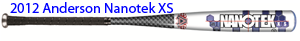
<style>
.page{position:relative;width:300px;height:41px;background:#fffffe}
.page>*{position:absolute;margin:0}
.t1{font:14.3px "MyriadPro-Regular";color:#0000ff}
</style>
<div class="page">
<p class="t1" style="left:10px;top:2px;width:163px;height:11px">2012 Anderson Nanotek XS</p>
</div>
